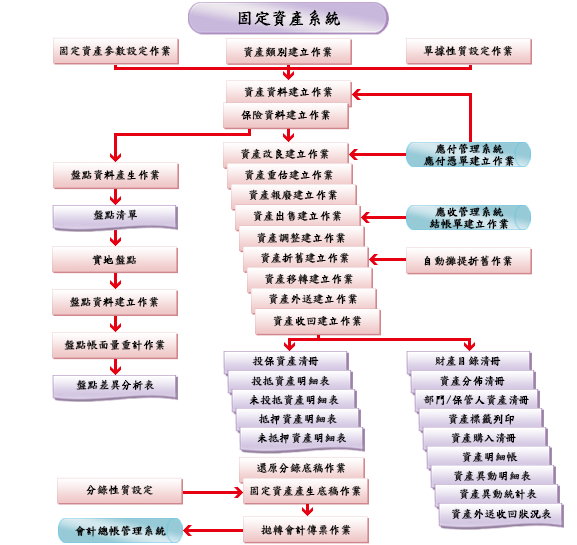
<style>
.page{position:relative;width:577px;height:545px;background:#ffffff}
.page>*{position:absolute;margin:0}
.t1{font:17px "DFKaiShu-SB-Estd-BF";color:#000000;font-weight:bold}
.t2{font:11px "DFKaiShu-SB-Estd-BF";color:#000000;font-weight:bold}
.t3{font:10.9px/12px "DFKaiShu-SB-Estd-BF";color:#000000;font-weight:bold}
.t4{font:10.9px "DFKaiShu-SB-Estd-BF";color:#000000;font-weight:bold}
</style>
<div class="page">
<p class="t1" style="left:238px;top:10px;width:103px;height:16px">固定資產系統</p>
<p class="t2" style="left:59px;top:45px;width:112px;height:12px">固定資產參數設定作業</p>
<p class="t2" style="left:244px;top:46px;width:88px;height:12px">資產類別建立作業</p>
<p class="t2" style="left:423px;top:45px;width:90px;height:12px">單據性質設定作業</p>
<p class="t2" style="left:244px;top:86px;width:89px;height:12px">資產資料建立作業</p>
<p class="t2" style="left:241px;top:109px;width:89px;height:12px">保險資料建立作業</p>
<p class="t2" style="left:241px;top:148px;width:88px;height:12px">資產改良建立作業</p>
<p class="t3" style="left:423px;top:143px;width:92px;height:24px;text-align:center">應付管理系統<br>應付憑單建立作業</p>
<p class="t2" style="left:71px;top:169px;width:89px;height:12px">盤點資料產生作業</p>
<p class="t2" style="left:245px;top:169px;width:88px;height:12px">資產重估建立作業</p>
<p class="t2" style="left:249px;top:189px;width:88px;height:12px">資產報廢建立作業</p>
<p class="t2" style="left:93px;top:209px;width:45px;height:12px">盤點清單</p>
<p class="t3" style="left:429px;top:206px;width:80px;height:24px;text-align:center">應收管理系統<br>結帳單建立作業</p>
<p class="t2" style="left:253px;top:210px;width:89px;height:12px">資產出售建立作業</p>
<p class="t2" style="left:257px;top:232px;width:88px;height:12px">資產調整建立作業</p>
<p class="t2" style="left:92px;top:254px;width:45px;height:12px">實地盤點</p>
<p class="t2" style="left:261px;top:252px;width:88px;height:12px">資產折舊建立作業</p>
<p class="t2" style="left:424px;top:255px;width:88px;height:12px">自動攤提折舊作業</p>
<p class="t2" style="left:265px;top:273px;width:88px;height:12px">資產移轉建立作業</p>
<p class="t2" style="left:269px;top:293px;width:88px;height:12px">資產外送建立作業</p>
<p class="t2" style="left:70px;top:296px;width:89px;height:12px">盤點資料建立作業</p>
<p class="t2" style="left:273px;top:315px;width:89px;height:12px">資產收回建立作業</p>
<p class="t2" style="left:64px;top:339px;width:101px;height:12px">盤點帳面量重計作業</p>
<p class="t2" style="left:252px;top:355px;width:67px;height:12px">投保資產清冊</p>
<p class="t2" style="left:435px;top:355px;width:66px;height:12px">財產目錄清冊</p>
<p class="t2" style="left:251px;top:375px;width:79px;height:12px">投抵資產明細表</p>
<p class="t2" style="left:440px;top:375px;width:65px;height:12px">資產分佈清冊</p>
<p class="t2" style="left:76px;top:379px;width:78px;height:12px">盤點差異分析表</p>
<p class="t2" style="left:249px;top:394px;width:90px;height:12px">未投抵資產明細表</p>
<p class="t2" style="left:423px;top:394px;width:106px;height:12px">部門/保管人資產清冊</p>
<p class="t2" style="left:258px;top:413px;width:79px;height:12px">抵押資產明細表</p>
<p class="t2" style="left:448px;top:413px;width:67px;height:12px">資產標籤列印</p>
<p class="t2" style="left:257px;top:432px;width:90px;height:12px">未抵押資產明細表</p>
<p class="t2" style="left:451px;top:432px;width:65px;height:12px">資產購入清冊</p>
<p class="t2" style="left:257px;top:462px;width:89px;height:12px">還原分錄底稿作業</p>
<p class="t2" style="left:462px;top:451px;width:56px;height:12px">資產明細帳</p>
<p class="t2" style="left:454px;top:470px;width:77px;height:12px">資產異動明細表</p>
<p class="t2" style="left:86px;top:484px;width:67px;height:12px">分錄性質設定</p>
<p class="t2" style="left:250px;top:485px;width:111px;height:12px">固定資產產生底稿作業</p>
<p class="t2" style="left:459px;top:488px;width:78px;height:12px">資產異動統計表</p>
<p class="t2" style="left:451px;top:508px;width:101px;height:11px">資產外送收回狀況表</p>
<p class="t4" style="left:75px;top:525px;width:91px;height:12px">會計總帳管理系統</p>
<p class="t2" style="left:261px;top:524px;width:90px;height:12px">拋轉會計傳票作業</p>
</div>
